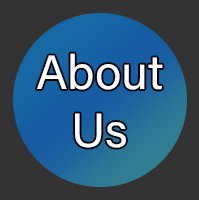
<style>
.page{position:relative;width:199px;height:200px;background:#333333}
.page>*{position:absolute;margin:0}
.t1{font:48px "AcuminConcept-Regular";color:#ffffff}
</style>
<div class="page">
<p class="t1" style="left:37px;top:53px;width:126px;height:95px;text-align:center">About<br>Us</p>
</div>
